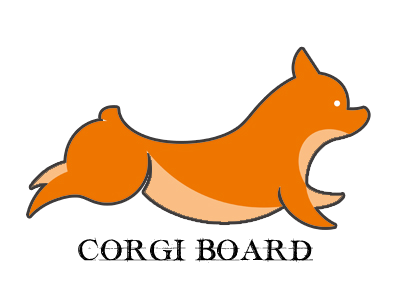
<style>
.page{position:relative;width:400px;height:300px;background:#ffffff}
.page>*{position:absolute;margin:0}
.t1{font:24px "handwriting-draft_free-version";color:#000000}
</style>
<div class="page">
<p class="t1" style="left:78px;top:237px;width:235px;height:26px">CORGI BOARD</p>
</div>
